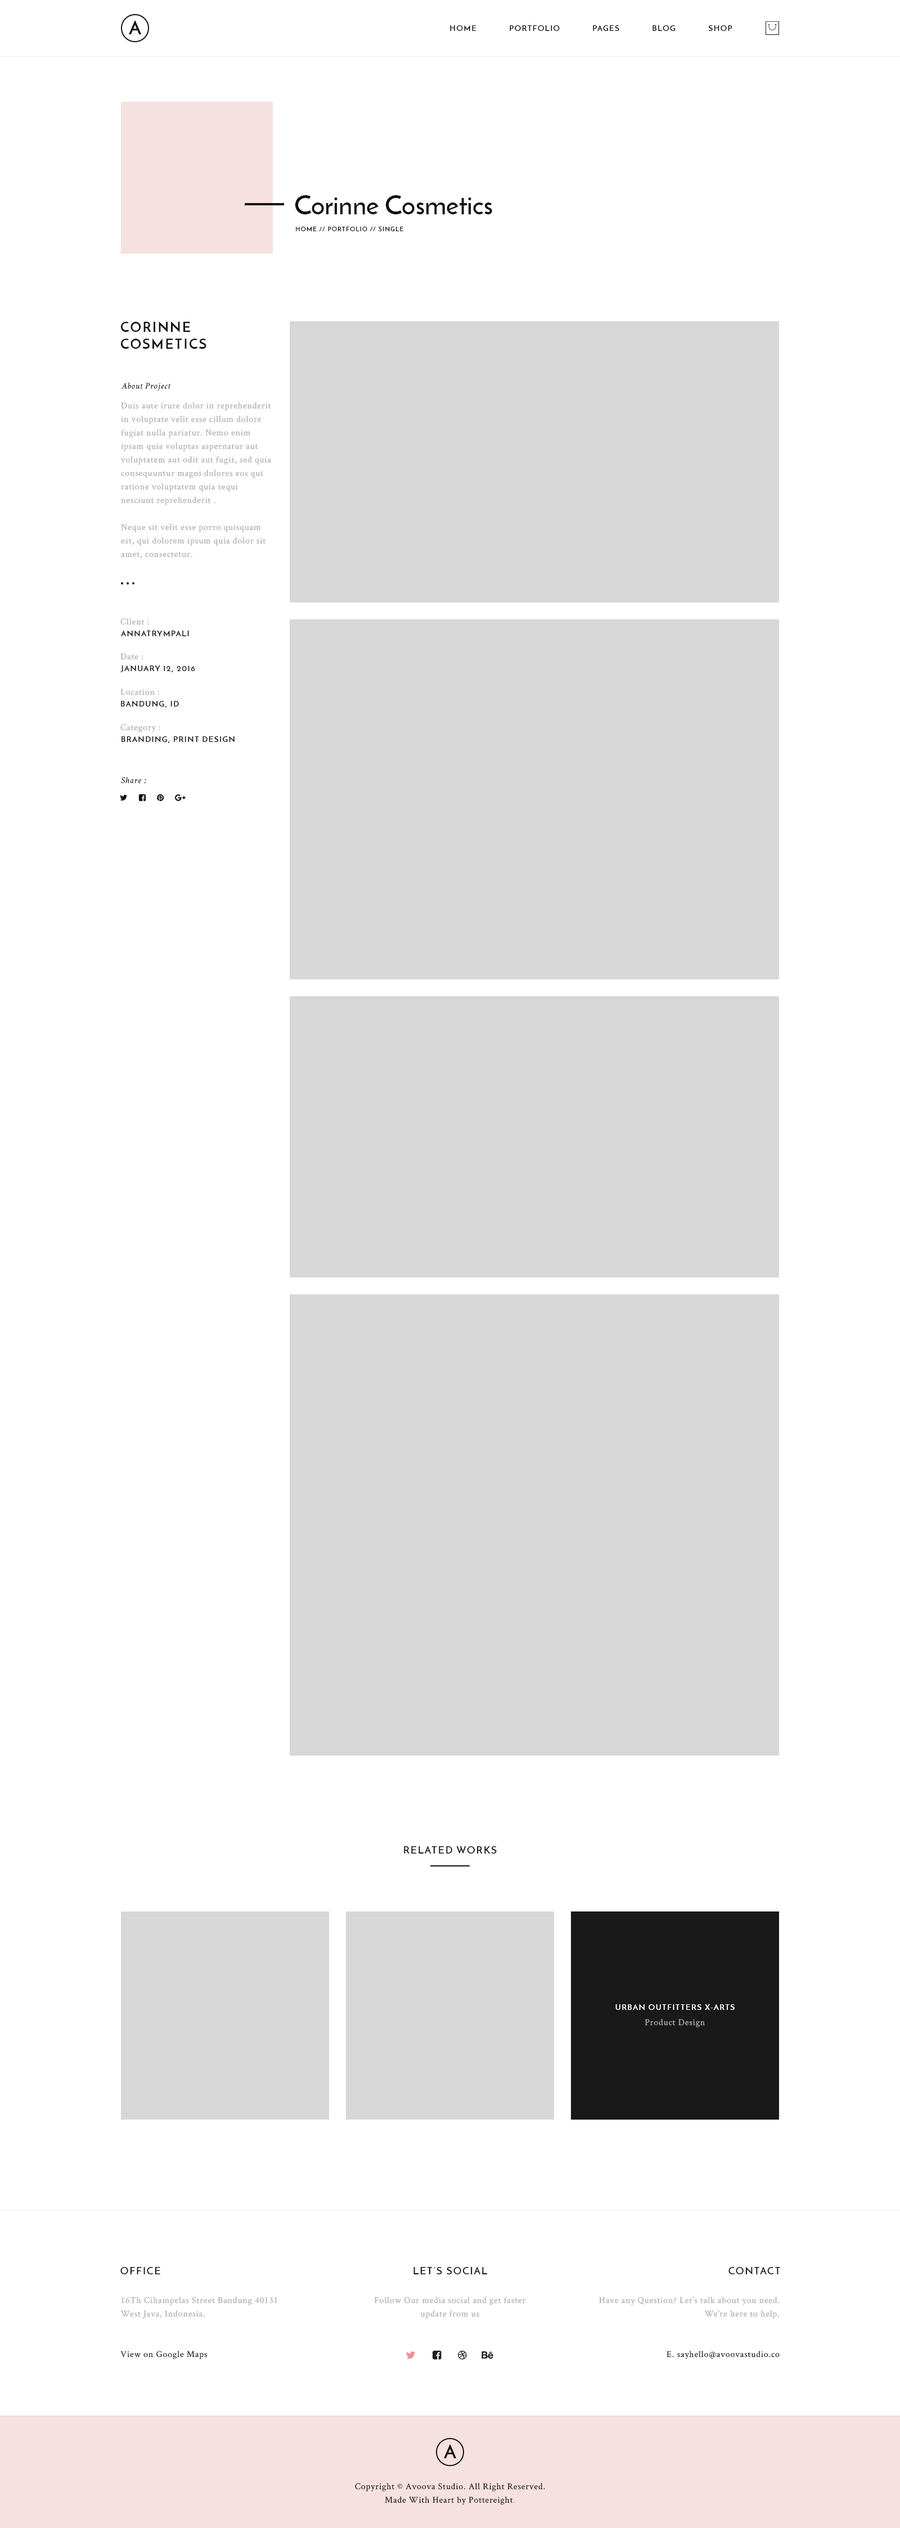
<style>
.page{position:relative;width:900px;height:2528px;background:#ffffff}
.page>*{position:absolute;margin:0}
.t1{font:19.1px "JosefinSans-Bold";letter-spacing:0.5em;color:#121212;text-transform:uppercase}
.t2{font:7.9px "JosefinSans-SemiBold";letter-spacing:0.1em;color:#121212;text-transform:uppercase}
.t3{font:27px "JosefinSans-SemiBold";color:#121212}
.t4{font:6.2px "JosefinSans-SemiBold";letter-spacing:0.1em;color:#121212;text-transform:uppercase}
.t5{font:13.5px/16.9px "JosefinSans-Bold";letter-spacing:0.1em;color:#121212;text-transform:uppercase}
.t6{font:9px "CrimsonText-Italic";letter-spacing:0.05em;color:#121212}
.t7{font:9px/13.5px "CrimsonText-Roman";letter-spacing:0.05em;color:#ababab}
.t8{font:9px "CrimsonText-Roman";letter-spacing:0.05em;color:#ababab}
.t9{font:10.1px "JosefinSans-SemiBold";letter-spacing:0.1em;color:#121212;text-transform:uppercase}
.t10{font:7.9px "JosefinSans-SemiBold";letter-spacing:0.1em;color:#ffffff;text-transform:uppercase}
.t11{font:9px "CrimsonText-Roman";letter-spacing:0.05em;color:#121212}
.t12{font:9px/13.5px "CrimsonText-Roman";letter-spacing:0.05em;color:#121212}
</style>
<div class="page">
<p class="t1" style="left:129px;top:20px;width:13px;height:14px">a</p>
<p class="t2" style="left:450px;top:25px;width:26px;height:6px">Home</p>
<p class="t2" style="left:510px;top:25px;width:50px;height:6px">Portfolio</p>
<p class="t2" style="left:593px;top:25px;width:26px;height:6px">Pages</p>
<p class="t2" style="left:652px;top:25px;width:23px;height:6px">Blog</p>
<p class="t2" style="left:708px;top:25px;width:24px;height:6px">Shop</p>
<p class="t3" style="left:295px;top:195px;width:197px;height:19px">Corinne Cosmetics</p>
<p class="t4" style="left:296px;top:226px;width:107px;height:6px">Home // Portfolio // Single</p>
<p class="t5" style="left:120px;top:321px;width:86px;height:28px">Corinne<br>Cosmetics</p>
<p class="t6" style="left:122px;top:382px;width:49px;height:9px">About Project</p>
<p class="t7" style="left:120px;top:402px;width:151px;height:157px">Duis aute irure dolor in reprehenderit in voluptate velit esse cillum dolore fugiat nulla pariatur. Nemo enim ipsam quia voluptas aspernatur aut voluptatem aut odit aut fugit, sed quia consequuntur magni dolores eos qui ratione voluptatem quia sequi nesciunt reprehenderit . <br><br>Neque sit velit esse porro quisquam est, qui dolorem ipsum quia dolor sit amet, consectetur.</p>
<p class="t2" style="left:120px;top:630px;width:69px;height:7px">Annatrympali</p>
<p class="t8" style="left:120px;top:618px;width:29px;height:7px">Client :</p>
<p class="t8" style="left:120px;top:653px;width:23px;height:7px">Date :</p>
<p class="t2" style="left:120px;top:665px;width:75px;height:7px">January 12, 2016</p>
<p class="t8" style="left:120px;top:688px;width:39px;height:7px">Location :</p>
<p class="t2" style="left:121px;top:700px;width:58px;height:8px">Bandung, Id</p>
<p class="t8" style="left:120px;top:724px;width:40px;height:8px">Category :</p>
<p class="t2" style="left:122px;top:736px;width:113px;height:7px">Branding, Print Design</p>
<p class="t6" style="left:121px;top:777px;width:25px;height:7px">Share :</p>
<p class="t9" style="left:404px;top:1846px;width:93px;height:8px">Related Works</p>
<p class="t10" style="left:615px;top:2004px;width:120px;height:6px">Urban Outfitters X-Arts</p>
<p class="t8" style="left:645px;top:2019px;width:60px;height:8px">Product Design</p>
<p class="t9" style="left:120px;top:2267px;width:40px;height:7px">Office</p>
<p class="t9" style="left:413px;top:2266px;width:74px;height:8px">Let’s Social</p>
<p class="t9" style="left:728px;top:2266px;width:52px;height:9px">Contact</p>
<p class="t7" style="left:120px;top:2297px;width:157px;height:22px">16Th Cihampelas Street Bandung 40131<br>West Java, Indonesia.</p>
<p class="t7" style="left:374px;top:2297px;width:152px;height:22px;text-align:center">Follow Our media social and get faster<br>update from us</p>
<p class="t7" style="left:599px;top:2296px;width:181px;height:23px;text-align:right">Have any Question? Let’s talk about you need.<br>We’re here to help.</p>
<p class="t11" style="left:120px;top:2351px;width:88px;height:8px">View on Google Maps</p>
<p class="t11" style="left:667px;top:2351px;width:113px;height:8px">E. sayhello@avoovastudio.co</p>
<p class="t1" style="left:444px;top:2444px;width:13px;height:14px">a</p>
<p class="t12" style="left:355px;top:2483px;width:190px;height:22px;text-align:center">Copyright © Avoova Studio. All Right Reserved.<br>Made With Heart by Pottereight<span class="t7">.</span></p>
</div>
